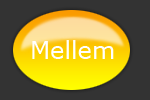
<style>
.page{position:relative;width:150px;height:100px;background:#333333}
.page>*{position:absolute;margin:0}
.t1{font:24px "MSReferenceSansSerif";color:#ffffff}
</style>
<div class="page">
<p class="t1" style="left:32px;top:40px;width:82px;height:19px">Mellem</p>
</div>
